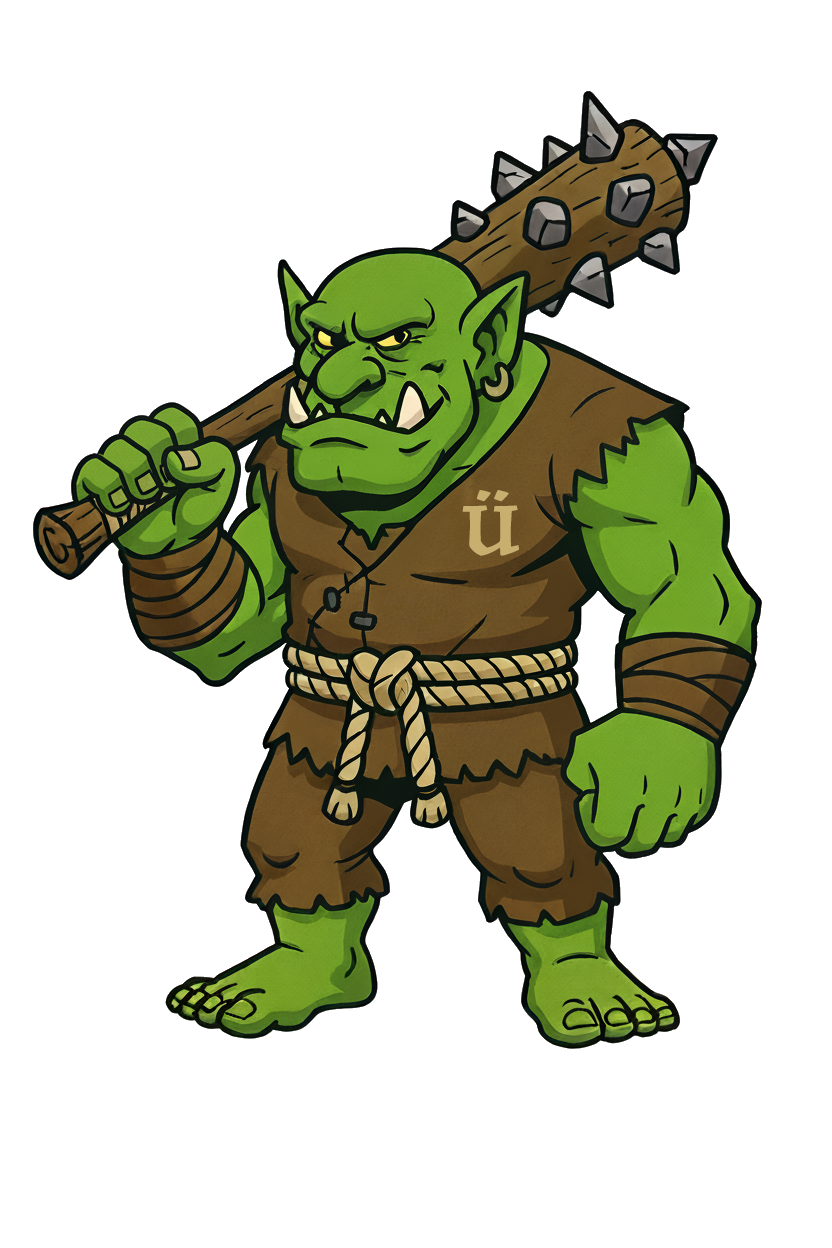
<style>
.page{position:relative;width:832px;height:1248px;background:#ffffff}
.page>*{position:absolute;margin:0}
.t1{font:78.4px "Katari-Bold";letter-spacing:0.05em;color:#c8af70;text-transform:uppercase}
</style>
<div class="page">
<p class="t1" style="left:462px;top:490px;width:57px;height:66px">Ü</p>
</div>
